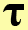
<style>
.page{position:relative;width:28px;height:30px;background:#fcfcaa}
.page>*{position:absolute;margin:0}
.t1{font:48px "TimesNewRomanPS-BoldMT";color:#000001}
</style>
<div class="page">
<p class="t1" style="left:3px;top:4px;width:21px;height:22px">τ</p>
</div>
